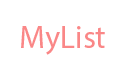
<style>
.page{position:relative;width:130px;height:80px;background:#ffffff}
.page>*{position:absolute;margin:0}
.t1{font:32px "MyriadPro-Regular";color:#fa8787}
</style>
<div class="page">
<p class="t1" style="left:21px;top:26px;width:84px;height:29px">MyList</p>
</div>
